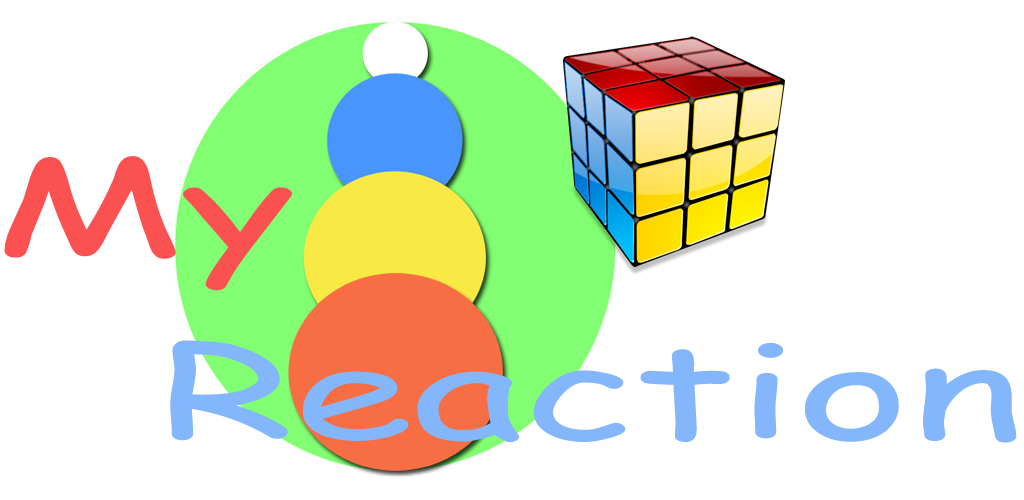
<style>
.page{position:relative;width:1024px;height:500px;background:#ffffff}
.page>*{position:absolute;margin:0}
.t1{font:129.7px "ComicSansMS";color:#fc5151;scale:1.67 1}
.t2{font:129.7px "ComicSansMS";color:#83b6fb;scale:1.67 1}
</style>
<div class="page">
<p class="t1" style="left:4px;top:156px;width:288px;height:135px">My</p>
<p class="t2" style="left:170px;top:340px;width:847px;height:103px">Reaction</p>
</div>
